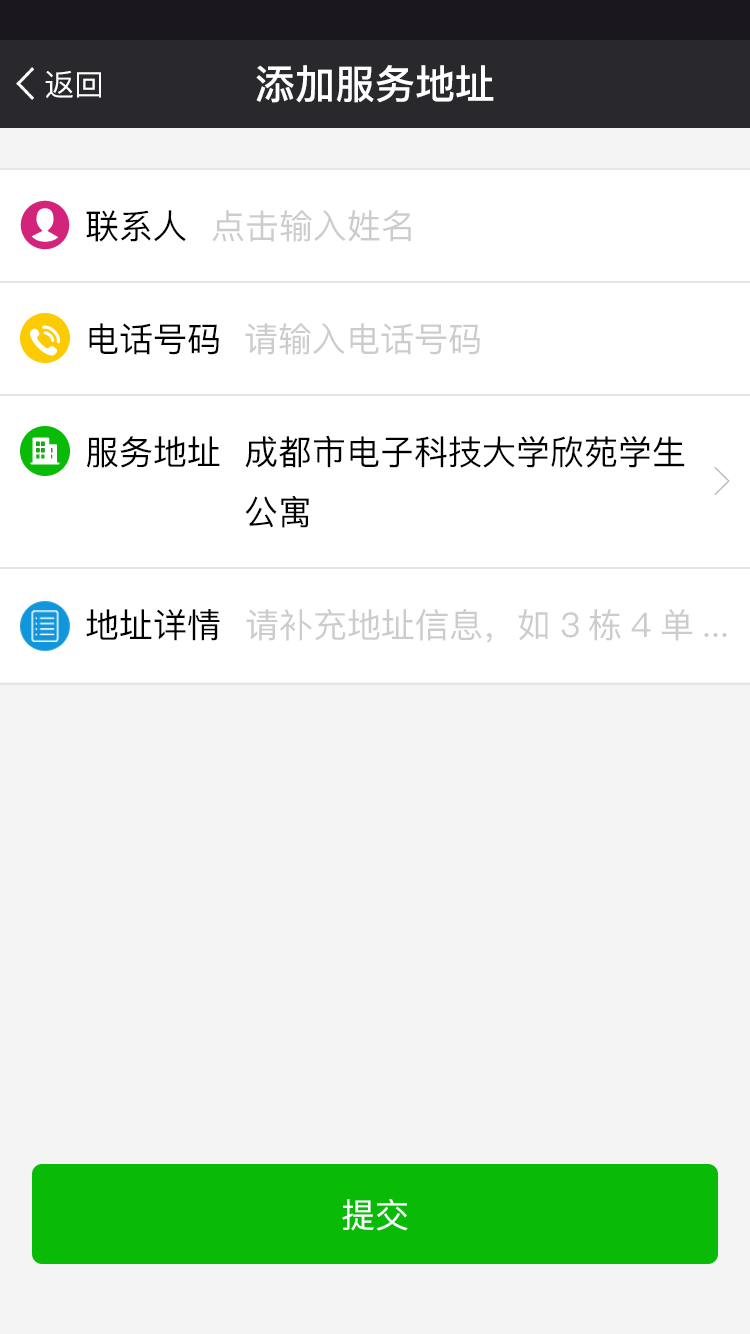
<style>
.page{position:relative;width:750px;height:1334px;background:#f4f4f4}
.page>*{position:absolute;margin:0}
.t1{font:40px "PingFangSC-Medium";color:#ffffff}
.t2{font:30px "PingFangSC";color:#ffffff}
.t3{font:34px "PingFangSC";color:#000000}
.t4{font:34px "PingFangSC";color:#cccccc}
.t5{font:34px "PingFangSC";color:#ffffff}
</style>
<div class="page">
<p class="t1" style="left:256px;top:65px;width:238px;height:38px">添加服务地址</p>
<p class="t2" style="left:45px;top:70px;width:56px;height:28px">返回</p>
<p class="t3" style="left:86px;top:210px;width:100px;height:32px">联系人</p>
<p class="t4" style="left:212px;top:210px;width:199px;height:32px">点击输入姓名</p>
<p class="t3" style="left:89px;top:323px;width:130px;height:32px">电话号码</p>
<p class="t4" style="left:245px;top:323px;width:235px;height:32px">请输入电话号码</p>
<p class="t3" style="left:87px;top:436px;width:133px;height:32px">服务地址</p>
<p class="t3" style="left:245px;top:436px;width:440px;height:92px">成都市电子科技大学欣苑学生<br>公寓</p>
<p class="t3" style="left:86px;top:609px;width:134px;height:32px">地址详情</p>
<p class="t4" style="left:246px;top:609px;width:481px;height:34px">请补充地址信息，如3栋4单...</p>
<p class="t5" style="left:342px;top:1199px;width:66px;height:32px">提交</p>
</div>
